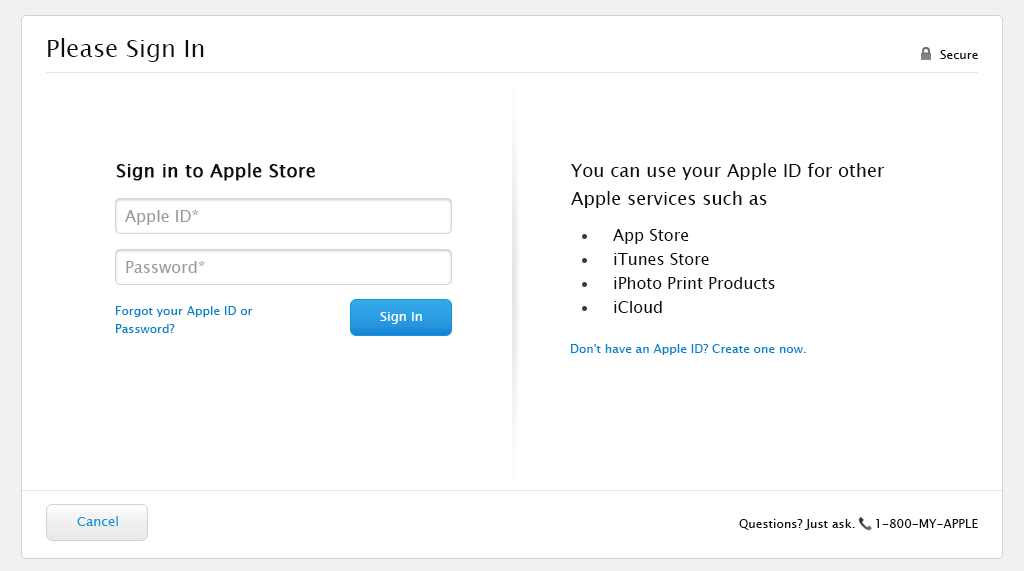
<style>
.page{position:relative;width:1024px;height:571px;background:#ffffff}
.page>*{position:absolute;margin:0}
.t1{font:24px "LucidaSansUnicode";color:#0e0e0e}
.t2{font:12px "LucidaSansUnicode";color:#0e0e0e}
.t3{font:18px "LucidaSansUnicode";color:#0e0e0e;font-weight:bold}
.t4{font:18px/28px "LucidaSansUnicode";color:#0e0e0e}
.t5{font:16px "LucidaSansUnicode";color:#999999}
.t6{font:16px/24px "LucidaSansUnicode";color:#0e0e0e}
.t7{font:12px/18px "LucidaSansUnicode";color:#0085cf}
.t8{font:13px "LucidaSansUnicode";color:#ffffff}
.t9{font:12px "LucidaSansUnicode";color:#0085cf}
.t10{font:13px "LucidaSansUnicode";color:#1397dc}
</style>
<div class="page">
<p class="t1" style="left:48px;top:38px;width:156px;height:24px">Please Sign In</p>
<p class="t2" style="left:940px;top:50px;width:38px;height:9px">Secure</p>
<p class="t3" style="left:116px;top:163px;width:199px;height:18px">Sign in to Apple Store</p>
<p class="t4" style="left:571px;top:163px;width:314px;height:45px">You can use your Apple ID for other <br>Apple services such as</p>
<p class="t5" style="left:125px;top:210px;width:74px;height:15px">Apple ID*</p>
<p class="t6" style="left:613px;top:229px;width:162px;height:84px">App Store<br>iTunes Store<br>iPhoto Print Products<br>iCloud</p>
<p class="t5" style="left:126px;top:261px;width:79px;height:12px">Password*</p>
<p class="t7" style="left:116px;top:306px;width:137px;height:27px">Forgot your Apple ID or<br>Password?</p>
<p class="t8" style="left:380px;top:312px;width:42px;height:12px">Sign In</p>
<p class="t9" style="left:571px;top:344px;width:235px;height:11px">Don't have an Apple ID? Create one now.</p>
<p class="t10" style="left:77px;top:516px;width:41px;height:10px">Cancel</p>
<p class="t2" style="left:739px;top:519px;width:239px;height:11px">Questions? Just ask.     1-800-MY-APPLE</p>
</div>
